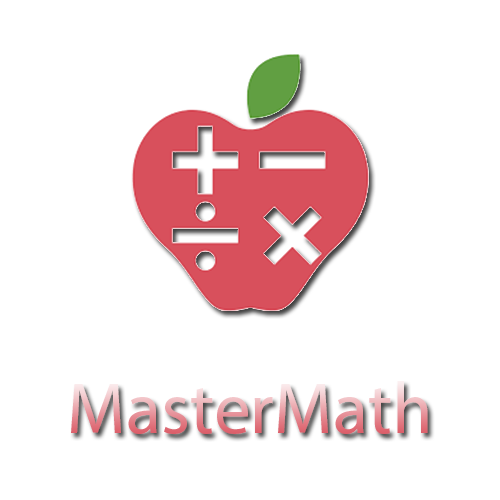
<style>
.page{position:relative;width:500px;height:500px;background:#ffffff}
.page>*{position:absolute;margin:0}
.t1{font:72.7px "MyriadPro-Regular"}
</style>
<div class="page">
<p class="t1" style="left:71px;top:381px;width:357px;height:53px">MasterMath</p>
</div>
